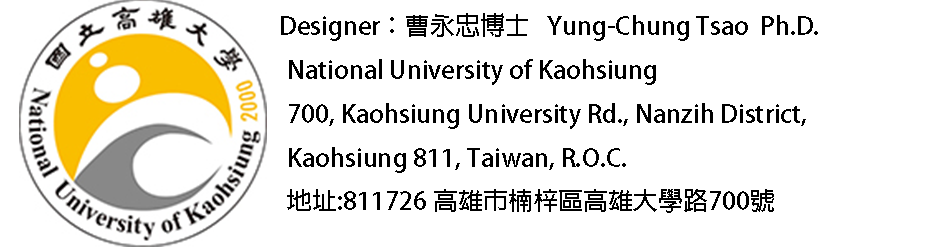
<style>
.page{position:relative;width:942px;height:248px;background:#ffffff}
.page>*{position:absolute;margin:0}
.t1{font:25px "AdobeFanHeitiStd-Bold";color:#000000}
</style>
<div class="page">
<p class="t1" style="left:281px;top:13px;width:537px;height:28px">Designer：曹永忠博士   Yung-Chung Tsao  Ph.D.</p>
<p class="t1" style="left:287px;top:59px;width:519px;height:154px">National University of Kaohsiung<br>700, Kaohsiung University Rd., Nanzih District, <br>Kaohsiung 811, Taiwan, R.O.C.<br>地址:811726 高雄市楠梓區高雄大學路700號</p>
</div>
